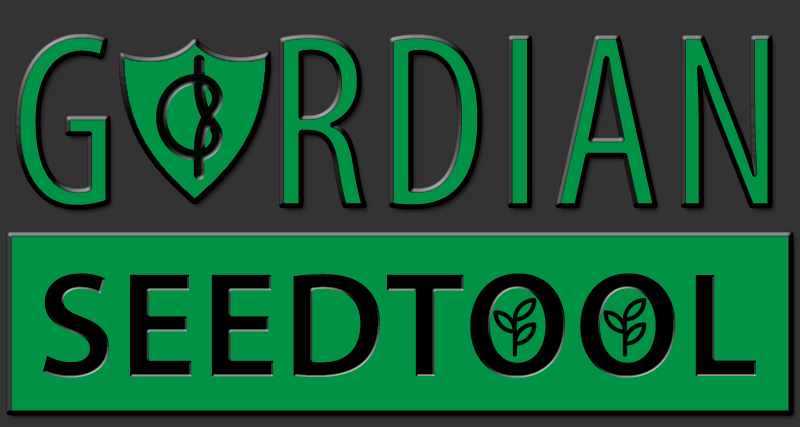
<style>
.page{position:relative;width:800px;height:427px;background:#009245}
.page>*{position:absolute;margin:0}
.t1{font:250px "MyriadPro-Cond";letter-spacing:0.03em;color:#009245}
.t2{font:150px "MyriadPro-Semibold";letter-spacing:0.03em;color:#000000}
</style>
<div class="page">
<p class="t1" style="left:17px;top:35px;width:753px;height:173px">G   RDIAN</p>
<p class="t2" style="left:43px;top:273px;width:713px;height:105px">SEEDTOOL</p>
</div>
